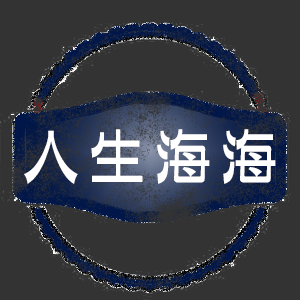
<style>
.page{position:relative;width:300px;height:300px;background:#333333}
.page>*{position:absolute;margin:0}
.t1{font:60px "DFYaYi-W6-WIN-BF";letter-spacing:0.1em;color:#ffffff}
</style>
<div class="page">
<p class="t1" style="left:24px;top:129px;width:252px;height:55px">人生海海</p>
</div>
